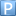
<style>
.page{position:relative;width:16px;height:16px}
.page>*{position:absolute;margin:0}
.t1{font:16px "Verdana";letter-spacing:-0.05em;color:#ffffff}
</style>
<div class="page">
<p class="t1" style="left:4px;top:2px;width:9px;height:13px">P</p>
</div>
